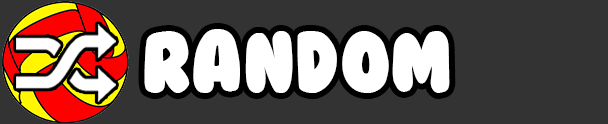
<style>
.page{position:relative;width:608px;height:124px;background:#333333}
.page>*{position:absolute;margin:0}
.t1{font:80px "BubbleGum";color:#ffffff}
</style>
<div class="page">
<p class="t1" style="left:144px;top:29px;width:306px;height:64px">Random</p>
</div>
